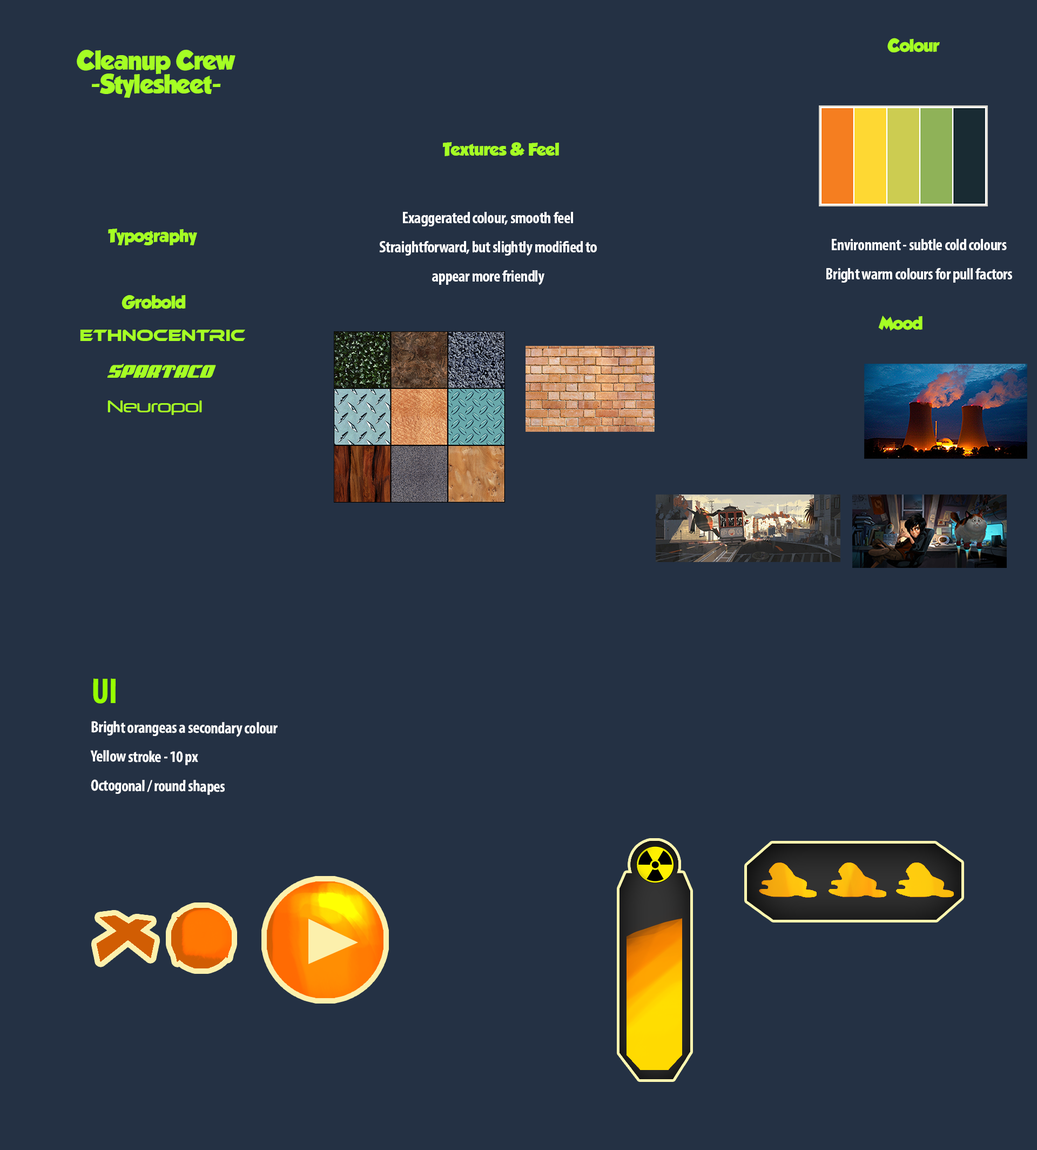
<style>
.page{position:relative;width:1037px;height:1150px;background:#243144}
.page>*{position:absolute;margin:0}
.t1{font:16.2px "GROBOLD";letter-spacing:-0.02em;color:#a5ff24}
.t2{font:23.6px/24.1px "GROBOLD";letter-spacing:-0.02em;color:#a5ff24}
.t3{font:16.2px/29.2px "MyriadPro-BoldCond";letter-spacing:-0.02em;color:#ffffff}
.t4{font:16.2px "EthnocentricRg-Regular";letter-spacing:-0.02em;color:#a5ff24}
.t5{font:19.2px "Spartaco";letter-spacing:-0.02em;color:#a5ff24}
.t6{font:16.2px "Neuropol-Regular";letter-spacing:-0.02em;color:#a5ff24}
.t7{font:36.2px/29.2px "MyriadPro-BoldCond";letter-spacing:-0.02em;color:#96ff00}
</style>
<div class="page">
<p class="t1" style="left:888px;top:38px;width:52px;height:14px">Colour</p>
<p class="t2" style="left:77px;top:50px;width:159px;height:48px;text-align:center">Cleanup Crew<br>-Stylesheet-</p>
<p class="t1" style="left:442px;top:142px;width:117px;height:14px">Textures &amp; Feel</p>
<p class="t3" style="left:379px;top:212px;width:218px;height:73px;text-align:center">Exaggerated colour, smooth feel<br>Straightforward, but slightly modified to appear more friendly</p>
<p class="t1" style="left:108px;top:229px;width:89px;height:16px">Typography</p>
<p class="t3" style="left:827px;top:239px;width:185px;height:44px;text-align:center">Environment - subtle cold colours <br>Bright warm colours for pull factors</p>
<p class="t1" style="left:122px;top:295px;width:64px;height:14px">Grobold</p>
<p class="t1" style="left:878px;top:315px;width:45px;height:16px">Mood</p>
<p class="t4" style="left:80px;top:330px;width:165px;height:11px">Ethnocentric</p>
<p class="t5" style="left:107px;top:364px;width:109px;height:14px">Spartaco</p>
<p class="t6" style="left:108px;top:400px;width:94px;height:15px">Neuropol</p>
<p class="t3" style="left:90px;top:678px;width:188px;height:117px"><span class="t7">UI <br></span>Bright orangeas a secondary colour<br>Yellow stroke - 10 px <br>Octogonal / round shapes</p>
</div>
